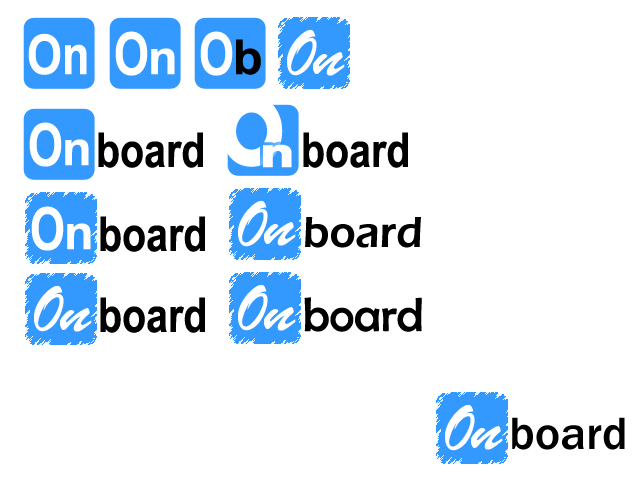
<style>
.page{position:relative;width:640px;height:480px;background:#ffffff}
.page>*{position:absolute;margin:0}
.t1{font:70px "BrushScriptMT";color:#ffffff;scale:0.83 1}
.t2{font:55px "ArialNarrow-Bold";color:#ffffff}
.t3{font:59.1px "ArialNarrow-Bold";color:#ffffff;scale:0.93 1}
.t4{font:48px "ArialNarrow-Bold";color:#000000;scale:1.24 1}
.t5{font:48px "ArialNarrow-Bold";color:#ffffff;scale:1.24 1}
.t6{font:67px "BrushScriptMT";color:#ffffff;scale:1.24 1}
.t7{font:100px "Aharoni-Bold";color:#ffffff;scale:0.83 1}
.t8{font:48px "ArialNarrow-Bold";color:#000000}
.t9{font:48px "Aharoni-Bold";color:#ffffff;scale:1.24 1}
.t10{font:45px "ErasITC-Demi";color:#000000;scale:0.94 1}
.t11{font:48px "BerlinSansFB-Reg";color:#000000}
.t12{font:47px "FranklinGothic-Medium";color:#000000}
</style>
<div class="page">
<p class="t1" style="left:287px;top:29px;width:30px;height:47px">O</p>
<p class="t2" style="left:28px;top:33px;width:59px;height:42px">On</p>
<p class="t3" style="left:115px;top:31px;width:33px;height:45px">O</p>
<p class="t3" style="left:200px;top:31px;width:33px;height:45px">O</p>
<p class="t4" style="left:236px;top:39px;width:25px;height:36px">b</p>
<p class="t5" style="left:151px;top:48px;width:24px;height:27px">n</p>
<p class="t6" style="left:313px;top:52px;width:32px;height:24px">n</p>
<p class="t7" style="left:221px;top:95px;width:62px;height:72px">O</p>
<p class="t3" style="left:29px;top:122px;width:33px;height:45px">O</p>
<p class="t8" style="left:98px;top:132px;width:105px;height:36px">board</p>
<p class="t8" style="left:303px;top:132px;width:105px;height:36px">board</p>
<p class="t5" style="left:65px;top:139px;width:24px;height:27px">n</p>
<p class="t9" style="left:263px;top:144px;width:29px;height:24px">n</p>
<p class="t3" style="left:31px;top:206px;width:33px;height:45px">O</p>
<p class="t1" style="left:238px;top:200px;width:30px;height:47px">O</p>
<p class="t8" style="left:100px;top:216px;width:105px;height:36px">board</p>
<p class="t6" style="left:264px;top:222px;width:32px;height:24px">n</p>
<p class="t10" style="left:305px;top:217px;width:116px;height:31px">board</p>
<p class="t5" style="left:67px;top:223px;width:24px;height:27px">n</p>
<p class="t1" style="left:34px;top:285px;width:30px;height:47px">O</p>
<p class="t1" style="left:238px;top:284px;width:30px;height:47px">O</p>
<p class="t8" style="left:100px;top:297px;width:105px;height:36px">board</p>
<p class="t11" style="left:304px;top:297px;width:118px;height:35px">board</p>
<p class="t6" style="left:60px;top:308px;width:32px;height:24px">n</p>
<p class="t6" style="left:264px;top:307px;width:32px;height:24px">n</p>
<p class="t1" style="left:445px;top:404px;width:30px;height:47px">O</p>
<p class="t12" style="left:512px;top:417px;width:113px;height:33px">board</p>
<p class="t6" style="left:471px;top:426px;width:32px;height:24px">n</p>
</div>
